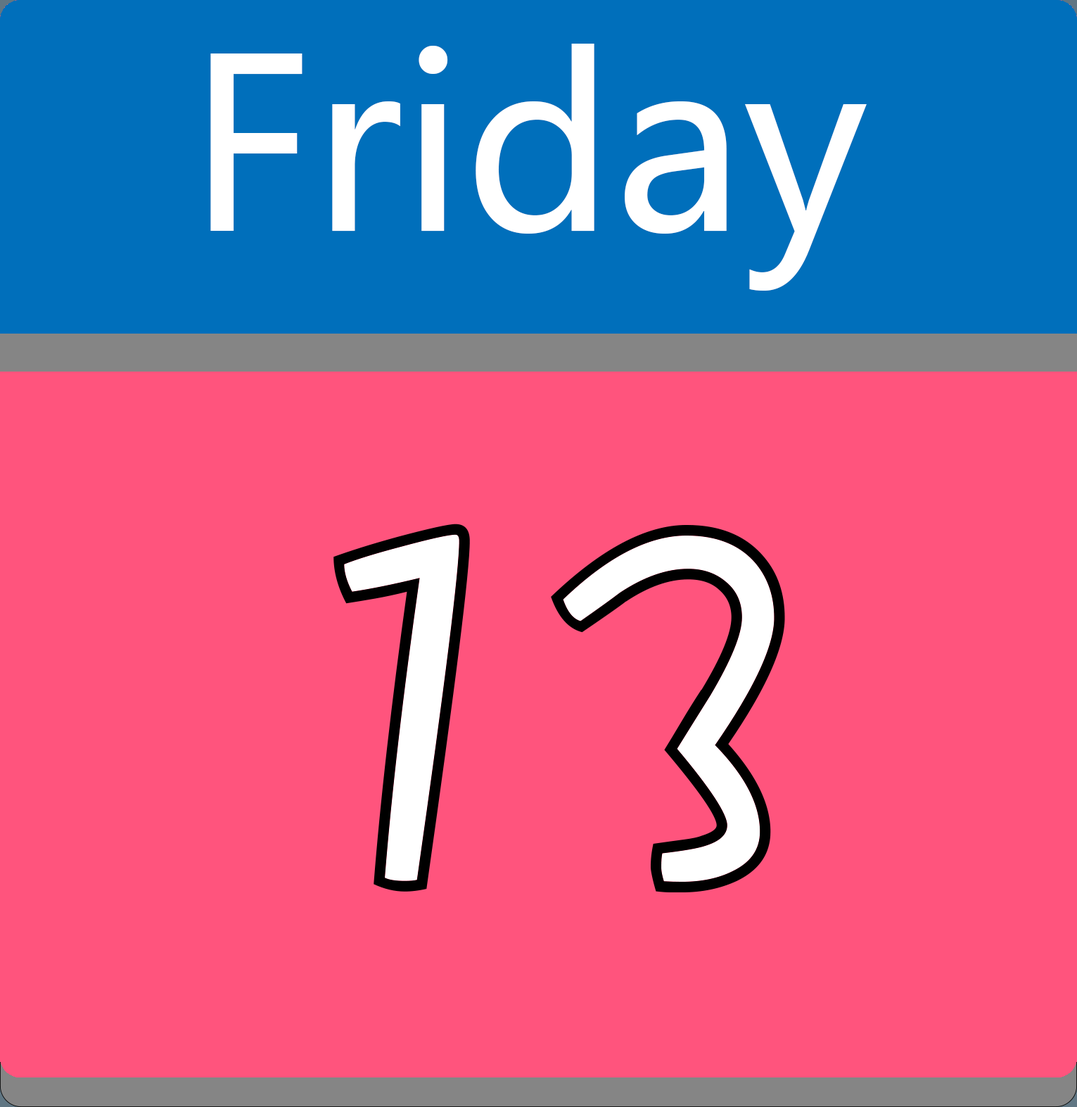
<style>
.page{position:relative;width:1077px;height:1107px;background:#ff547d}
.page>*{position:absolute;margin:0}
.t1{font:234.6px "MicrosoftYaHeiUI";color:#ffffff}
</style>
<div class="page">
<p class="t1" style="left:210px;top:44px;width:657px;height:247px">Friday</p>
</div>
